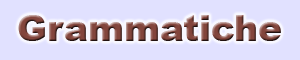
<style>
.page{position:relative;width:300px;height:60px;background:#e1e1ff}
.page>*{position:absolute;margin:0}
.t1{font:36px "Arial-Black"}
</style>
<div class="page">
<p class="t1" style="left:18px;top:15px;width:263px;height:26px">Grammatiche</p>
</div>
